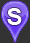
<style>
.page{position:relative;width:30px;height:43px;background:#333333}
.page>*{position:absolute;margin:0}
.t1{font:24px "Arial-BoldMT";color:#ffffff}
</style>
<div class="page">
<p class="t1" style="left:7px;top:8px;width:15px;height:17px">S</p>
</div>
